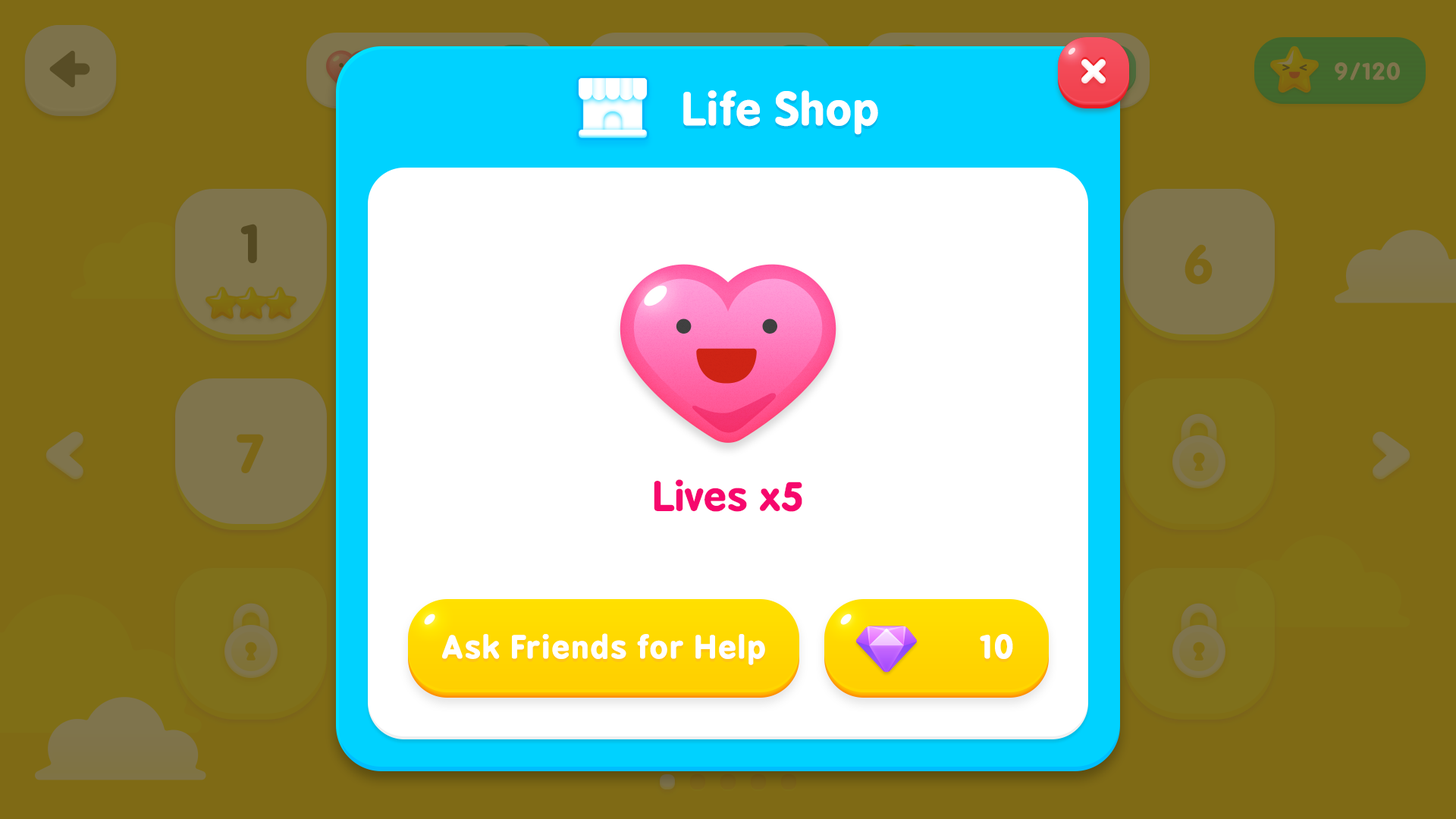
<style>
.page{position:relative;width:1456px;height:819px;background:#7f6a15}
.page>*{position:absolute;margin:0}
.t1{font:43.1px "BPreplay-Bold";color:#ffffff;scale:1.05 1}
.t2{font:38.9px "BPreplay-Bold";color:#f6076d;scale:1.05 1}
.t3{font:30.3px "BPreplay-Bold";color:#ffffff;font-weight:bold;scale:1.05 1}
.t4{font:31.7px "BPreplay-Bold";color:#ffffff;text-transform:uppercase;font-weight:bold;scale:1.05 1}
</style>
<div class="page">
<p class="t1" style="left:683px;top:90px;width:195px;height:45px">Life Shop</p>
<p class="t2" style="left:654px;top:479px;width:148px;height:33px">Lives x5</p>
<p class="t3" style="left:442px;top:633px;width:323px;height:32px">Ask Friends for Help</p>
<p class="t4" style="left:980px;top:634px;width:33px;height:25px">10</p>
</div>
